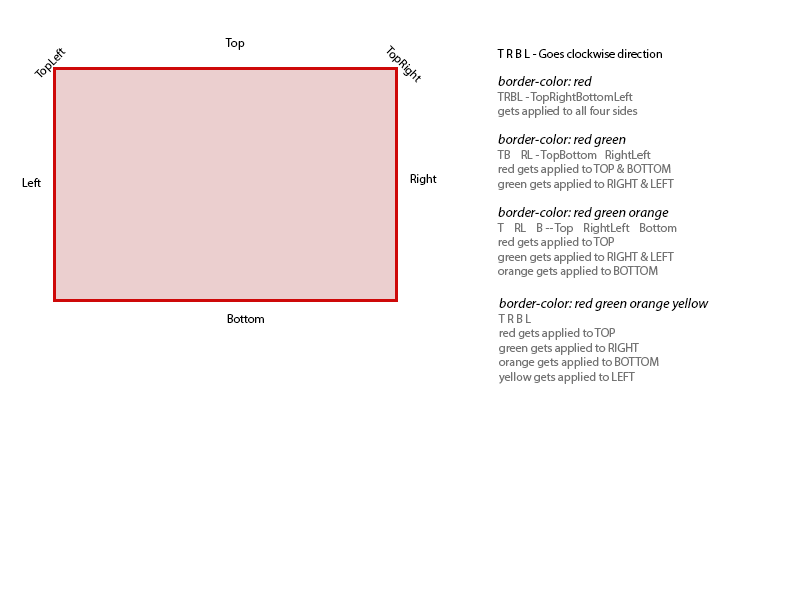
<style>
.page{position:relative;width:800px;height:600px;background:#ffffff}
.page>*{position:absolute;margin:0}
.t1{font:12px "MyriadPro-Regular";color:#000000}
.t2{font:14px "MyriadPro-It";color:#000000}
.t3{font:12px "MyriadPro-Regular";color:#747474}
</style>
<div class="page">
<p class="t1" style="left:225px;top:38px;width:20px;height:12px">Top</p>
<p class="t1" style="left:34px;top:48px;width:32px;height:30px;rotate:-45deg">TopLeft</p>
<p class="t1" style="left:386px;top:45px;width:35px;height:38px;rotate:45deg">TopRight</p>
<p class="t1" style="left:497px;top:49px;width:165px;height:9px">T R B L - Goes clockwise direction</p>
<p class="t2" style="left:498px;top:76px;width:94px;height:10px">border-color: red</p>
<p class="t3" style="left:497px;top:92px;width:141px;height:26px">TRBL - TopRightBottomLeft<br>gets applied to all four sides</p>
<p class="t2" style="left:498px;top:134px;width:128px;height:13px">border-color: red green</p>
<p class="t3" style="left:497px;top:150px;width:177px;height:41px">TB    RL - TopBottom   RightLeft<br>red gets applied to TOP &amp; BOTTOM<br>green gets applied to RIGHT &amp; LEFT</p>
<p class="t1" style="left:410px;top:174px;width:27px;height:11px">Right</p>
<p class="t1" style="left:22px;top:178px;width:19px;height:9px">Left</p>
<p class="t2" style="left:498px;top:207px;width:171px;height:13px">border-color: red green orange</p>
<p class="t3" style="left:497px;top:223px;width:180px;height:55px">T    RL    B -- Top    RightLeft    Bottom<br>red gets applied to TOP<br>green gets applied to RIGHT &amp; LEFT<br>orange gets applied to BOTTOM</p>
<p class="t2" style="left:499px;top:298px;width:210px;height:13px">border-color: red green orange yellow</p>
<p class="t1" style="left:227px;top:314px;width:37px;height:9px">Bottom</p>
<p class="t3" style="left:498px;top:314px;width:161px;height:70px">T R B L<br>red gets applied to TOP<br>green gets applied to RIGHT<br>orange gets applied to BOTTOM<br>yellow gets applied to LEFT</p>
</div>
